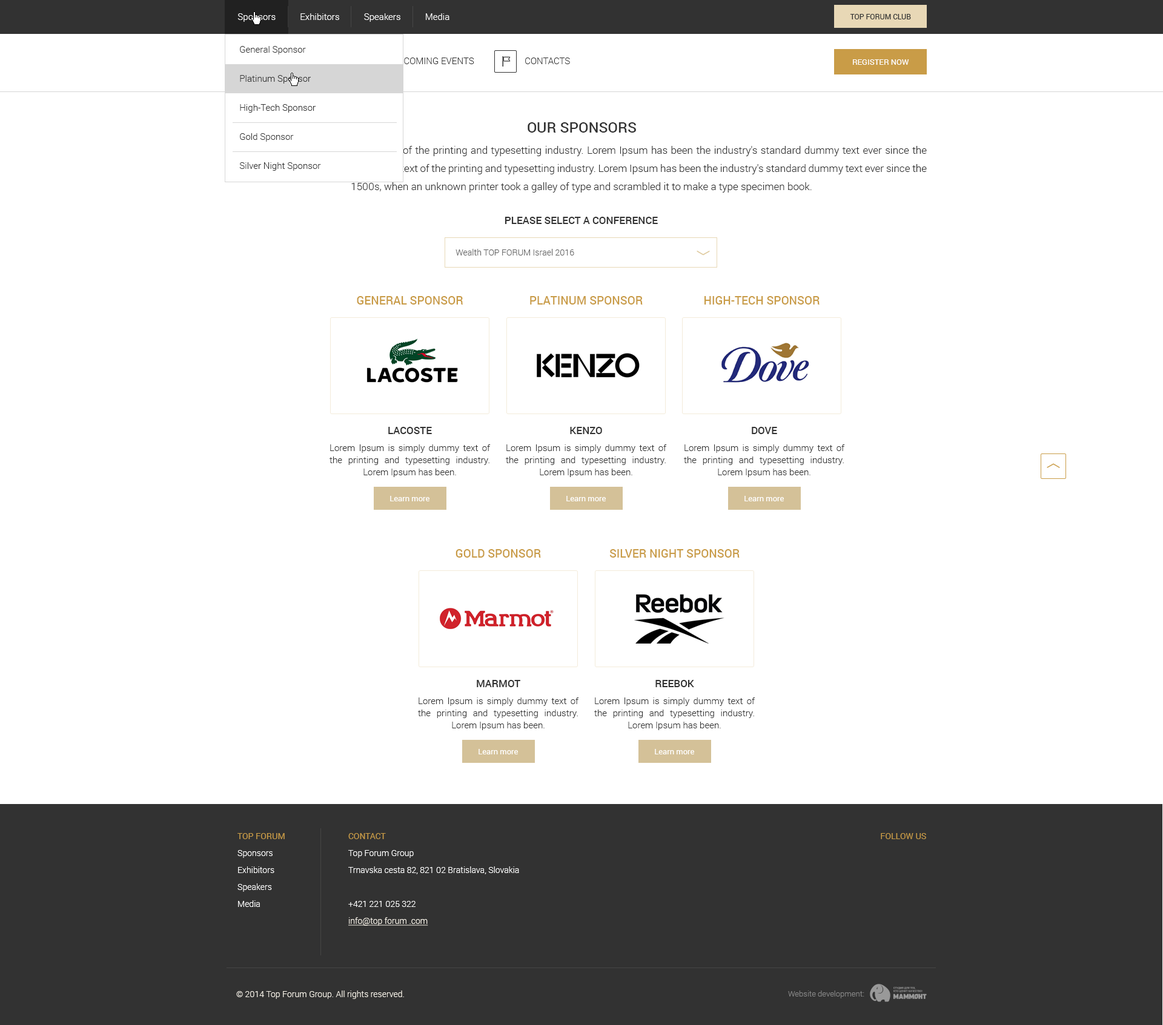
<style>
.page{position:relative;width:1163px;height:1025px;background:#ffffff}
.page>*{position:absolute;margin:0}
.t1{font:9.1px "Roboto-Light";color:#ffffff}
.t2{font:7.3px "Roboto-Regular";color:#323232}
.t3{font:9.1px/14.5px "Roboto-Light";color:#323232}
.t4{font:9.1px "Roboto-Light";color:#323232}
.t5{font:7.9px "Roboto-Regular";color:#ffffff}
.t6{font:14.5px "Roboto-Medium";color:#323232}
.t7{font:10.3px/18.2px "Roboto-Light";color:#323232}
.t8{font:10.3px "Roboto-Medium";color:#323232;text-transform:uppercase}
.t9{font:8.5px "Roboto-Light";color:#606060}
.t10{font:11.5px "Roboto-Medium";color:#c99c47;text-transform:uppercase}
.t11{font:9.1px/12.1px "Roboto-Light";color:#323232}
.t12{font:10.3px/12.1px "Roboto-Medium";color:#323232;text-transform:uppercase}
.t13{font:10.3px/12.1px "Roboto-Medium";color:#323232}
.t14{font:8.5px/13.3px "Roboto-Light";color:#ffffff}
.t15{font:8.5px/13.3px "Roboto-Regular";color:#c99c47}
.t16{font:8.5px/13.3px "Roboto-Light";color:#f8f3e9;text-decoration:underline}
.t17{font:8.5px "Roboto-Regular";color:#c99c47}
.t18{font:8.5px "Roboto-Light";color:#f8f3e9}
.t19{font:7.9px "Roboto-Light";color:#858585}
</style>
<div class="page">
<p class="t1" style="left:237px;top:13px;width:212px;height:9px">Sponsors           Exhibitors           Speakers           Media</p>
<p class="t2" style="left:850px;top:14px;width:61px;height:5px">TOP FORUM CLUB</p>
<p class="t3" style="left:239px;top:46px;width:82px;height:125px">General Sponsor<br>Platinum Sponsor<br>High-Tech Sponsor<br>Gold Sponsor<br>Silver Night Sponsor</p>
<p class="t4" style="left:392px;top:58px;width:82px;height:6px">UPCOMING EVENTS</p>
<p class="t4" style="left:525px;top:58px;width:45px;height:6px">CONTACTS</p>
<p class="t5" style="left:853px;top:59px;width:56px;height:6px">REGISTER NOW</p>
<p class="t6" style="left:528px;top:122px;width:108px;height:11px">OUR SPONSORS</p>
<p class="t7" style="left:237px;top:146px;width:690px;height:47px;text-align:justify">Lorem Ipsum is simply dummy text of the printing and typesetting industry. Lorem Ipsum has been the industry's standard dummy text ever since the 1500Lorem Ipsum is simply dummy text of the printing and typesetting industry. Lorem Ipsum has been the industry's standard dummy text ever since the 1500s, when an unknown printer took a galley of type and scrambled it to make a type specimen book.</p>
<p class="t8" style="left:505px;top:217px;width:153px;height:7px">please select a conference</p>
<p class="t9" style="left:455px;top:249px;width:119px;height:7px">Wealth TOP FORUM Israel 2016</p>
<p class="t10" style="left:357px;top:296px;width:106px;height:9px">General Sponsor</p>
<p class="t10" style="left:530px;top:296px;width:113px;height:9px">Platinum Sponsor</p>
<p class="t10" style="left:704px;top:296px;width:115px;height:9px">High-Tech Sponsor</p>
<p class="t11" style="left:329px;top:427px;width:162px;height:50px;text-align:justify"><span class="t12">lacoste<br></span>Lorem Ipsum is simply dummy text of the printing and typesetting industry. Lorem Ipsum has been.</p>
<p class="t11" style="left:506px;top:427px;width:161px;height:50px;text-align:justify"><span class="t13">KENZO<br></span>Lorem Ipsum is simply dummy text of the printing and typesetting industry. Lorem Ipsum has been.</p>
<p class="t11" style="left:684px;top:427px;width:161px;height:50px;text-align:justify"><span class="t12">dove<br></span>Lorem Ipsum is simply dummy text of the printing and typesetting industry. Lorem Ipsum has been.</p>
<p class="t5" style="left:390px;top:496px;width:39px;height:5px">Learn more</p>
<p class="t5" style="left:566px;top:496px;width:40px;height:5px">Learn more</p>
<p class="t5" style="left:744px;top:496px;width:40px;height:5px">Learn more</p>
<p class="t10" style="left:455px;top:549px;width:86px;height:9px">Gold Sponsor</p>
<p class="t10" style="left:609px;top:549px;width:131px;height:9px">Silver Night Sponsor</p>
<p class="t11" style="left:418px;top:680px;width:161px;height:50px;text-align:justify"><span class="t12">marmot<br></span>Lorem Ipsum is simply dummy text of the printing and typesetting industry. Lorem Ipsum has been.</p>
<p class="t11" style="left:594px;top:680px;width:161px;height:50px;text-align:justify"><span class="t12">reebok<br></span>Lorem Ipsum is simply dummy text of the printing and typesetting industry. Lorem Ipsum has been.</p>
<p class="t5" style="left:478px;top:749px;width:40px;height:6px">Learn more</p>
<p class="t5" style="left:655px;top:749px;width:39px;height:6px">Learn more</p>
<p class="t14" style="left:237px;top:833px;width:48px;height:74px;text-align:justify"><span class="t15">TOP FORUM<br></span>Sponsors<br>Exhibitors <br>Speakers<br>Media</p>
<p class="t14" style="left:348px;top:833px;width:171px;height:93px;text-align:justify"><span class="t15">CONTACT<br></span>Top Forum Group<br>Trnavska cesta 82, 821 02 Bratislava, Slovakia<br> <br>+421 221 025 322<br><span class="t16">info@top forum .com</span></p>
<p class="t17" style="left:881px;top:833px;width:45px;height:6px">FOLLOW US</p>
<p class="t18" style="left:236px;top:991px;width:168px;height:8px">© 2014 Top Forum Group. All rights reserved.</p>
<p class="t19" style="left:788px;top:991px;width:76px;height:8px">Website development:</p>
</div>
